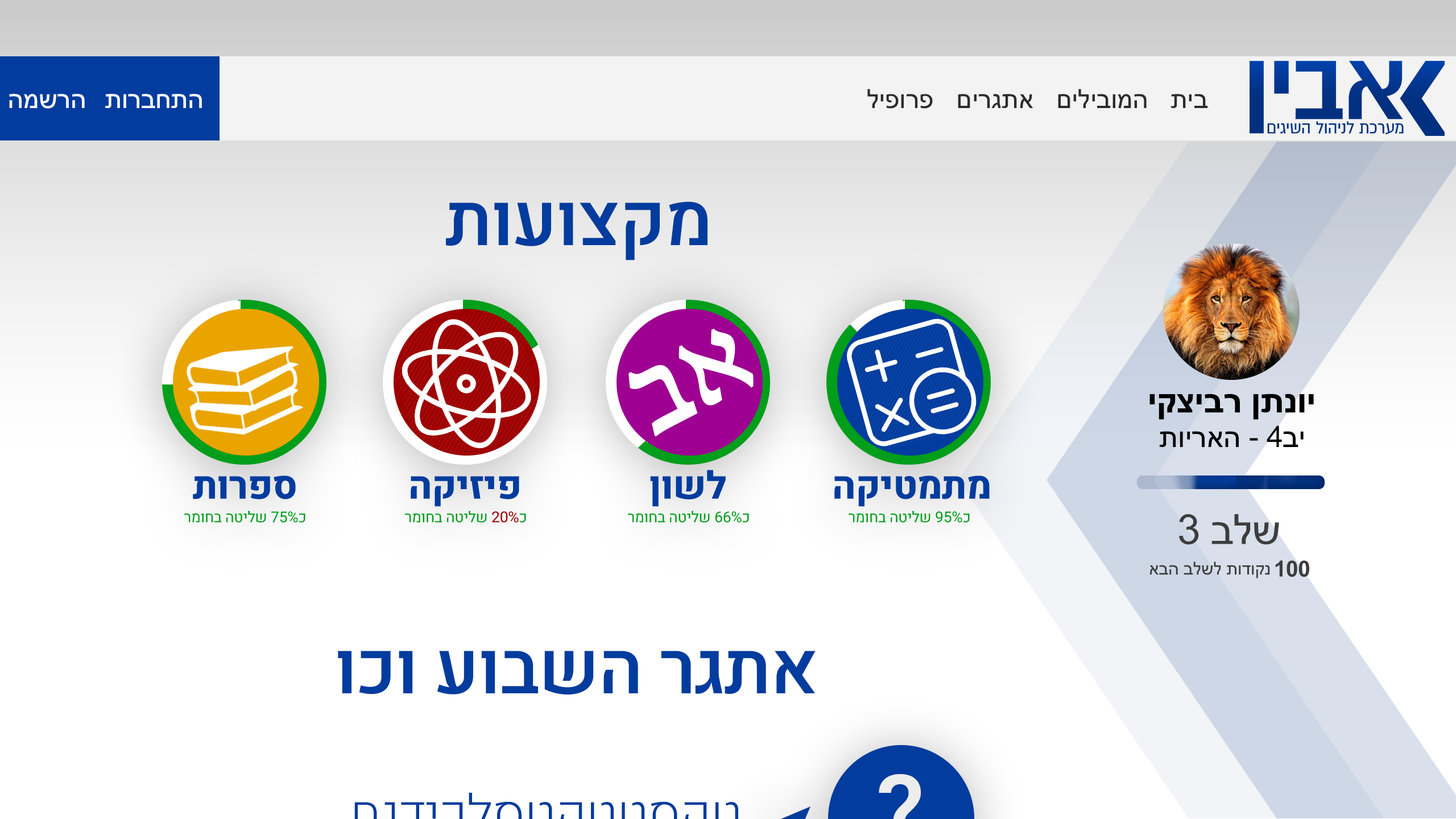
<style>
.page{position:relative;width:1456px;height:819px;background:#ffffff}
.page>*{position:absolute;margin:0}
.t1{font:26.6px "ArialMT";letter-spacing:-0.01em;color:#2c2c2c}
.t2{font:26.6px "ArialMT";letter-spacing:-0.01em;color:#ffffff}
.t3{font:72.9px "Heebo-Medium";letter-spacing:-0.01em;color:#013c9e}
.t4{font:35.3px "Arial-BoldMT";letter-spacing:-0.01em;color:#000000}
.t5{font:29.7px "ArialMT";letter-spacing:-0.01em;color:#000000}
.t6{font:38.1px "Heebo-ExtraBold";letter-spacing:-0.01em;color:#013c9e}
.t7{font:15.1px "Heebo-Regular";letter-spacing:-0.01em;color:#019e1b}
.t8{font:15.1px "Heebo-Regular";letter-spacing:-0.01em;color:#9e0101}
.t9{font:41.6px "ArialMT";letter-spacing:-0.01em;color:#3d3d3d}
.t10{font:17.9px "ArialMT";letter-spacing:-0.01em;color:#3d3d3d}
.t11{font:22.1px "Arial-BoldMT";letter-spacing:-0.01em;color:#3d3d3d}
</style>
<div class="page">
<p class="t1" style="left:867px;top:89px;width:66px;height:20px">פרופיל</p>
<p class="t1" style="left:1058px;top:89px;width:89px;height:19px">המובילים</p>
<p class="t2" style="left:9px;top:94px;width:76px;height:15px">הרשמה</p>
<p class="t2" style="left:105px;top:94px;width:97px;height:14px">התחברות</p>
<p class="t1" style="left:958px;top:94px;width:75px;height:14px">אתגרים</p>
<p class="t1" style="left:1170px;top:94px;width:38px;height:14px">בית</p>
<p class="t3" style="left:446px;top:201px;width:262px;height:59px">מקצועות</p>
<p class="t4" style="left:1149px;top:394px;width:165px;height:26px">יונתן רביצקי</p>
<p class="t5" style="left:1159px;top:425px;width:145px;height:22px">יב4 - האריות</p>
<p class="t6" style="left:650px;top:470px;width:76px;height:37px">לשון</p>
<p class="t6" style="left:193px;top:475px;width:103px;height:24px">ספרות</p>
<p class="t6" style="left:411px;top:476px;width:108px;height:31px">פיזיקה</p>
<p class="t6" style="left:834px;top:475px;width:156px;height:32px">מתמטיקה</p>
<p class="t7" style="left:184px;top:511px;width:121px;height:12px">כ75% שליטה בחומר</p>
<p class="t7" style="left:405px;top:511px;width:121px;height:12px">כ<span class="t8">20%</span> שליטה בחומר</p>
<p class="t7" style="left:628px;top:511px;width:121px;height:12px">כ66% שליטה בחומר</p>
<p class="t7" style="left:849px;top:511px;width:121px;height:12px">כ95% שליטה בחומר</p>
<p class="t9" style="left:1179px;top:514px;width:100px;height:31px">שלב 3</p>
<p class="t10" style="left:1149px;top:561px;width:121px;height:17px">נקודות לשלב הבא</p>
<p class="t11" style="left:1275px;top:560px;width:34px;height:17px">100</p>
<p class="t3" style="left:338px;top:651px;width:478px;height:44px">אתגר השבוע וכו</p>
</div>
